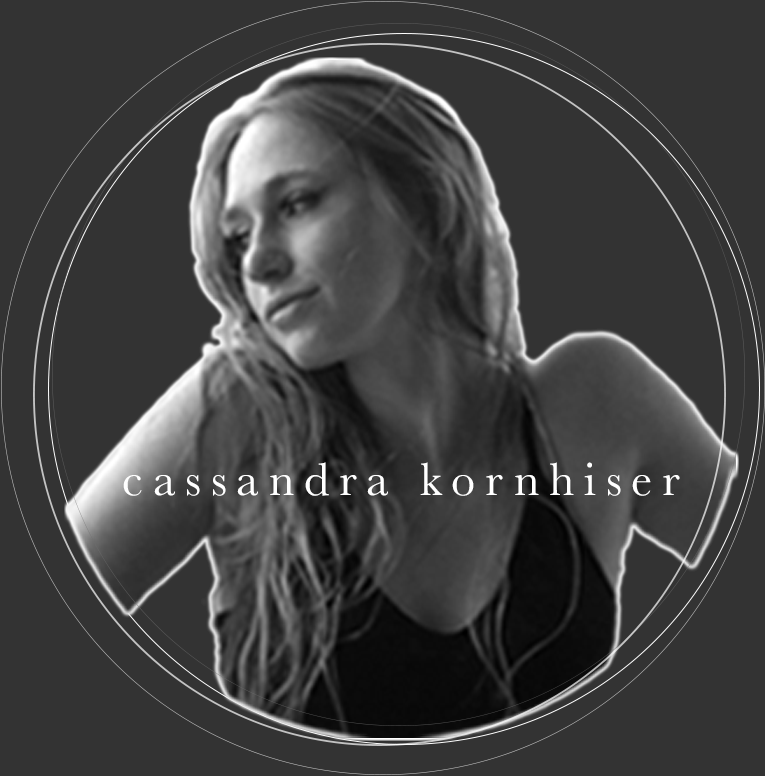
<style>
.page{position:relative;width:765px;height:776px;background:#333333}
.page>*{position:absolute;margin:0}
.t1{font:48.2px "Baskerville";letter-spacing:0.2em;color:#ffffff}
</style>
<div class="page">
<p class="t1" style="left:123px;top:462px;width:557px;height:34px">cassandra kornhiser</p>
</div>
